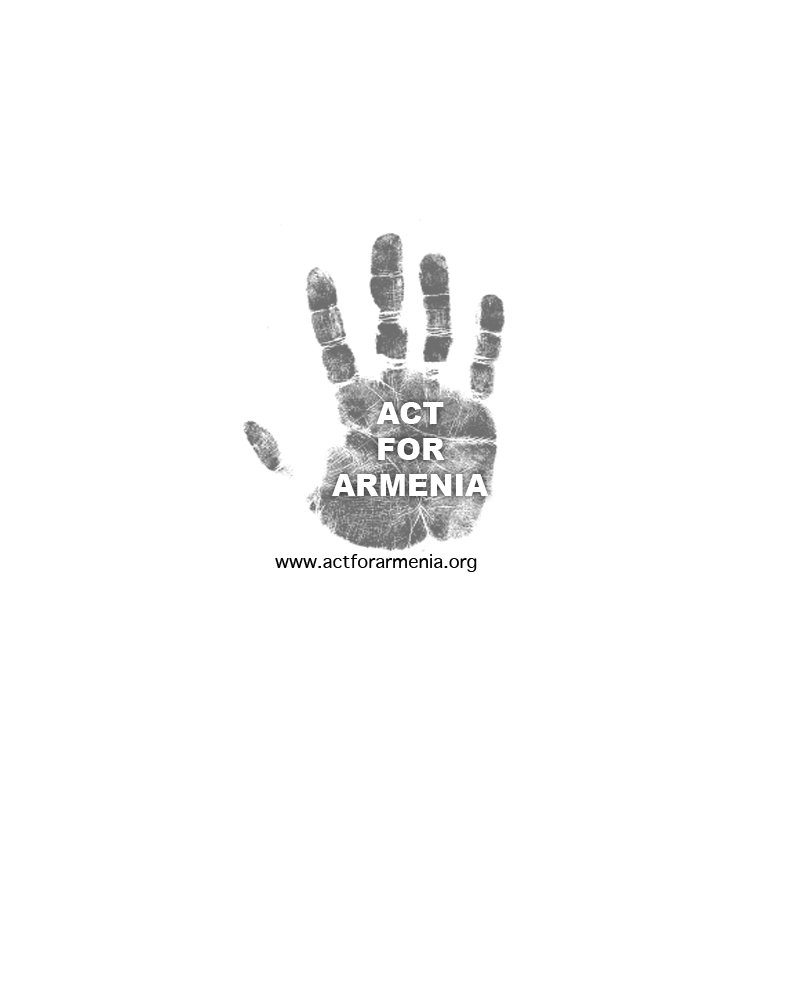
<style>
.page{position:relative;width:800px;height:1000px;background:#ffffff}
.page>*{position:absolute;margin:0}
.t1{font:30px "Arial-Black";color:#ffffff}
.t2{font:18px "Sathu";color:#000000}
</style>
<div class="page">
<p class="t1" style="left:332px;top:402px;width:157px;height:94px;text-align:center">ACT <br>FOR <br>ARMENIA</p>
<p class="t2" style="left:275px;top:554px;width:202px;height:18px">www.actforarmenia.org</p>
</div>
